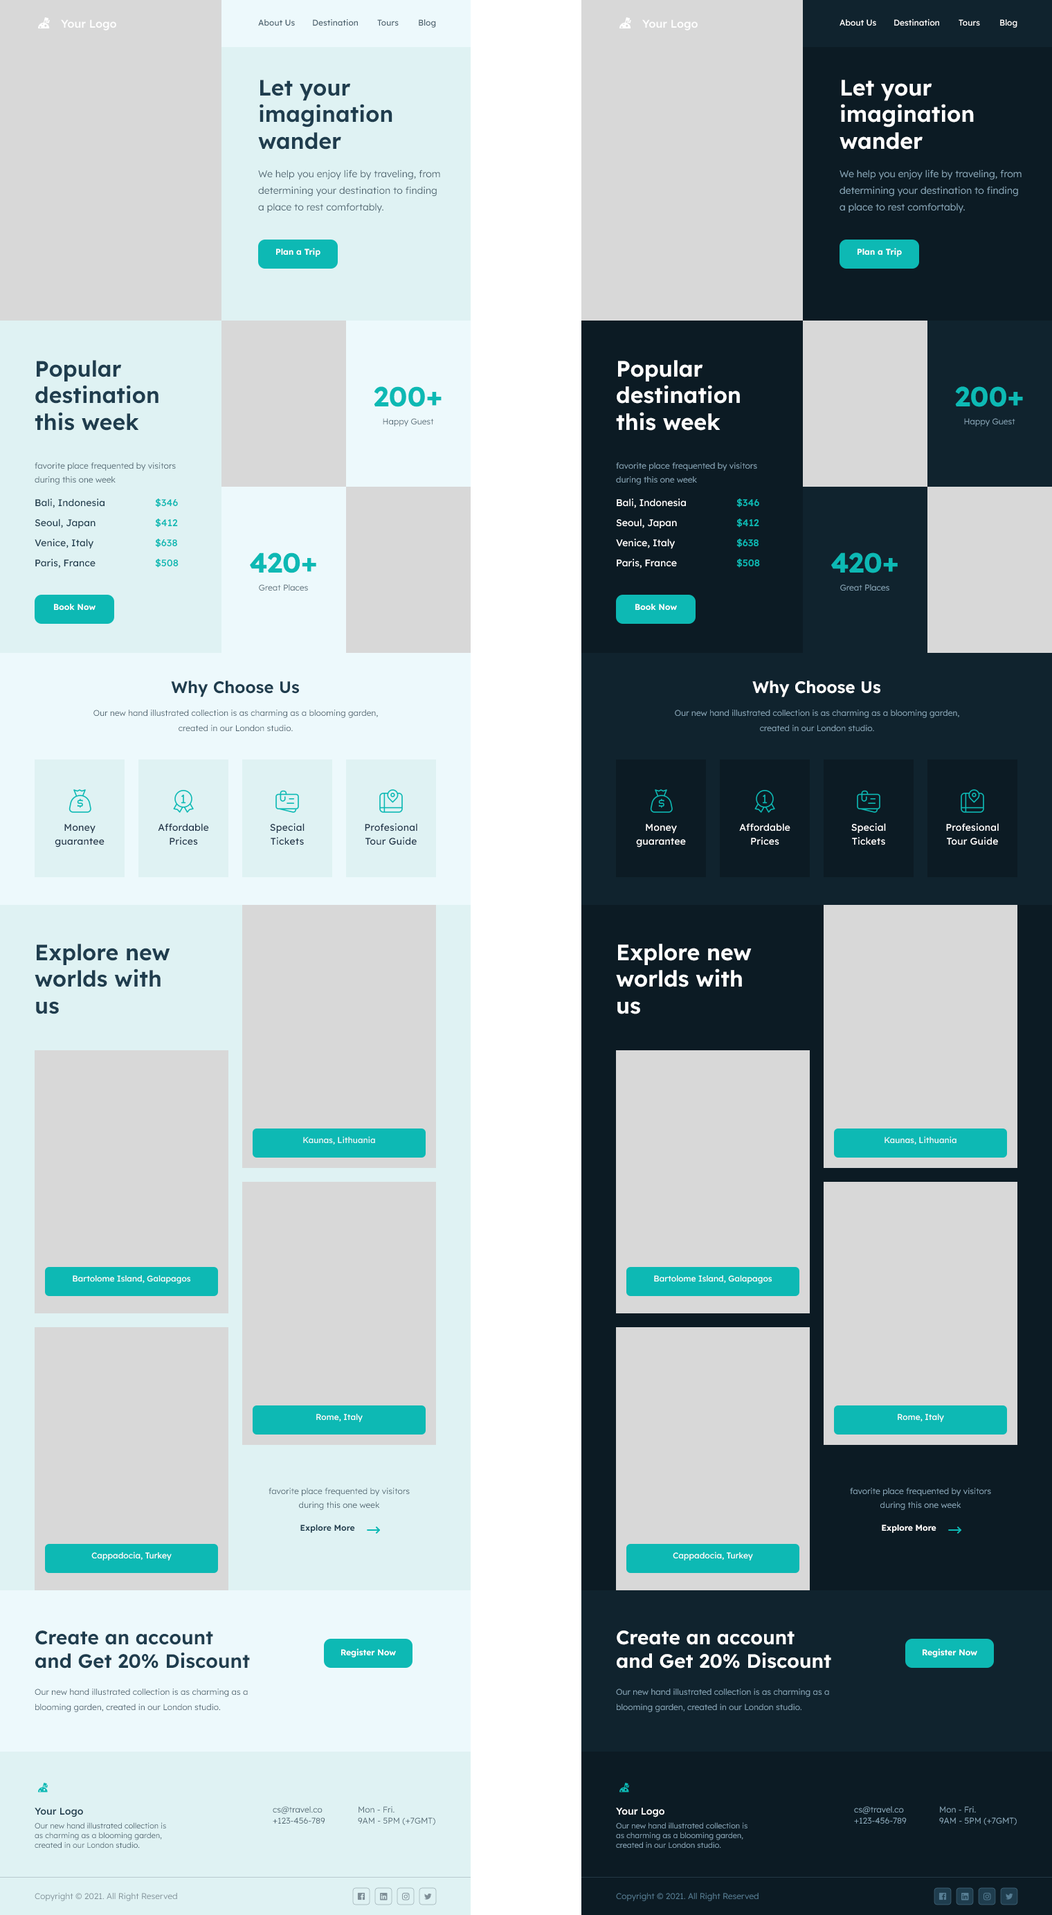
<style>
.page{position:relative;width:1052px;height:1915px;background:#d8d8d8}
.page>*{position:absolute;margin:0}
.t1{font:11.1px "LexendDeca-Medium";color:#ffffff}
.t2{font:8.3px "LexendDeca-Regular";color:#4b616d}
.t3{font:8.3px "LexendDeca-Regular";color:#ffffff}
.t4{font:22.2px "LexendDeca-SemiBold";color:#1f3d4e}
.t5{font:22.2px "LexendDeca-SemiBold";color:#ffffff}
.t6{font:9.7px/16.6px "LexendDeca-Light";color:#4b616d}
.t7{font:9.7px/16.6px "LexendDeca-Light";color:#8aa9bb}
.t8{font:8.3px "LexendDeca-SemiBold";color:#ffffff}
.t9{font:27.7px "LexendDeca-Bold";color:#0db9b4}
.t10{font:8.3px "LexendDeca-Light";color:#4b616d}
.t11{font:8.3px "LexendDeca-Light";color:#8aa9bb}
.t12{font:8.3px/13.8px "LexendDeca-Light";color:#4b616d}
.t13{font:8.3px/13.8px "LexendDeca-Light";color:#8aa9bb}
.t14{font:9.7px "LexendDeca-Regular";color:#1f3d4e}
.t15{font:9.7px "LexendDeca-Medium";color:#0db9b4}
.t16{font:9.7px "LexendDeca-Regular";color:#ffffff}
.t17{font:16.6px "LexendDeca-SemiBold";color:#1f3d4e}
.t18{font:16.6px "LexendDeca-SemiBold";color:#ffffff}
.t19{font:8.3px/15.2px "LexendDeca-Light";color:#4b616d}
.t20{font:8.3px/15.2px "LexendDeca-Light";color:#8aa9bb}
.t21{font:9.7px/13.8px "LexendDeca-Regular";letter-spacing:0.011em;color:#1e3348}
.t22{font:9.7px/13.8px "LexendDeca-Regular";letter-spacing:0.011em;color:#ffffff}
.t23{font:8.3px "LexendDeca-Regular";color:#edf9fc}
.t24{font:8.3px "LexendDeca-SemiBold";color:#1f3d4e}
.t25{font:19.4px "LexendDeca-SemiBold";color:#1f3d4e}
.t26{font:19.4px "LexendDeca-SemiBold";color:#ffffff}
.t27{font:9.7px "LexendDeca-Medium";color:#1f3d4e}
.t28{font:8.3px/11.1px "LexendDeca-Light";color:#4b616d}
.t29{font:9.7px "LexendDeca-Medium";color:#ffffff}
.t30{font:8.3px/11.1px "LexendDeca-Light";color:#8aa9bb}
.t31{font:7.6px/9.7px "LexendDeca-Light";color:#4b616d}
.t32{font:7.6px/9.7px "LexendDeca-Light";color:#8aa9bb}
.t33{font:8.3px "LexendDeca-Light";color:#7f8f97}
.t34{font:8.3px "LexendDeca-Light";color:#577e94}
</style>
<div class="page">
<p class="t1" style="left:61px;top:19px;width:55px;height:11px">Your Logo</p>
<p class="t2" style="left:258px;top:19px;width:37px;height:7px">About Us</p>
<p class="t2" style="left:313px;top:19px;width:46px;height:7px">Destination</p>
<p class="t2" style="left:377px;top:19px;width:22px;height:7px">Tours</p>
<p class="t2" style="left:419px;top:19px;width:17px;height:9px">Blog</p>
<p class="t1" style="left:642px;top:19px;width:56px;height:11px">Your Logo</p>
<p class="t3" style="left:840px;top:19px;width:36px;height:7px">About Us</p>
<p class="t3" style="left:894px;top:19px;width:46px;height:7px">Destination</p>
<p class="t3" style="left:959px;top:19px;width:21px;height:7px">Tours</p>
<p class="t3" style="left:1000px;top:19px;width:18px;height:9px">Blog</p>
<p class="t4" style="left:258px;top:80px;width:135px;height:70px">Let your imagination wander</p>
<p class="t5" style="left:840px;top:80px;width:134px;height:70px">Let your imagination wander</p>
<p class="t6" style="left:258px;top:170px;width:182px;height:43px">We help you enjoy life by traveling, from determining your destination to finding a place to rest comfortably.</p>
<p class="t7" style="left:840px;top:170px;width:182px;height:43px">We help you enjoy life by traveling, from determining your destination to finding a place to rest comfortably.</p>
<p class="t8" style="left:276px;top:248px;width:45px;height:9px">Plan a Trip</p>
<p class="t8" style="left:858px;top:248px;width:44px;height:9px">Plan a Trip</p>
<p class="t4" style="left:35px;top:360px;width:124px;height:71px">Popular destination<br>this week</p>
<p class="t5" style="left:616px;top:360px;width:124px;height:71px">Popular destination<br>this week</p>
<p class="t9" style="left:374px;top:386px;width:68px;height:21px">200+</p>
<p class="t9" style="left:955px;top:386px;width:68px;height:21px">200+</p>
<p class="t10" style="left:383px;top:418px;width:51px;height:8px">Happy Guest</p>
<p class="t11" style="left:964px;top:418px;width:52px;height:8px">Happy Guest</p>
<p class="t12" style="left:35px;top:462px;width:141px;height:23px">favorite place frequented by visitors during this one week</p>
<p class="t13" style="left:616px;top:462px;width:141px;height:23px">favorite place frequented by visitors during this one week</p>
<p class="t14" style="left:35px;top:498px;width:70px;height:10px">Bali, Indonesia</p>
<p class="t15" style="left:155px;top:498px;width:23px;height:9px">$346</p>
<p class="t16" style="left:617px;top:498px;width:69px;height:10px">Bali, Indonesia</p>
<p class="t15" style="left:737px;top:498px;width:22px;height:9px">$346</p>
<p class="t14" style="left:35px;top:519px;width:61px;height:10px">Seoul, Japan</p>
<p class="t15" style="left:155px;top:519px;width:23px;height:9px">$412</p>
<p class="t16" style="left:616px;top:519px;width:61px;height:10px">Seoul, Japan</p>
<p class="t15" style="left:737px;top:519px;width:22px;height:9px">$412</p>
<p class="t14" style="left:35px;top:539px;width:59px;height:10px">Venice, Italy</p>
<p class="t15" style="left:155px;top:539px;width:22px;height:9px">$638</p>
<p class="t16" style="left:616px;top:539px;width:60px;height:10px">Venice, Italy</p>
<p class="t15" style="left:737px;top:539px;width:22px;height:9px">$638</p>
<p class="t9" style="left:250px;top:552px;width:66px;height:21px">420+</p>
<p class="t9" style="left:831px;top:552px;width:67px;height:21px">420+</p>
<p class="t14" style="left:35px;top:559px;width:61px;height:9px">Paris, France</p>
<p class="t15" style="left:155px;top:559px;width:24px;height:9px">$508</p>
<p class="t16" style="left:617px;top:559px;width:60px;height:9px">Paris, France</p>
<p class="t15" style="left:737px;top:559px;width:23px;height:9px">$508</p>
<p class="t10" style="left:259px;top:584px;width:49px;height:7px">Great Places</p>
<p class="t11" style="left:840px;top:584px;width:50px;height:7px">Great Places</p>
<p class="t8" style="left:53px;top:604px;width:43px;height:7px">Book Now</p>
<p class="t8" style="left:635px;top:604px;width:42px;height:7px">Book Now</p>
<p class="t17" style="left:171px;top:681px;width:129px;height:16px">Why Choose Us</p>
<p class="t18" style="left:753px;top:681px;width:128px;height:16px">Why Choose Us</p>
<p class="t19" style="left:93px;top:710px;width:285px;height:22px;text-align:center">Our new hand illustrated collection is as charming as a blooming garden, created in our London studio.</p>
<p class="t20" style="left:675px;top:710px;width:285px;height:22px;text-align:center">Our new hand illustrated collection is as charming as a blooming garden, created in our London studio.</p>
<p class="t21" style="left:55px;top:824px;width:50px;height:23px;text-align:center">Money guarantee</p>
<p class="t21" style="left:158px;top:823px;width:51px;height:22px;text-align:center">Affordable <br>Prices</p>
<p class="t21" style="left:270px;top:823px;width:35px;height:22px;text-align:center">Special<br>Tickets</p>
<p class="t21" style="left:365px;top:823px;width:52px;height:22px;text-align:center">Profesional <br>Tour Guide</p>
<p class="t22" style="left:636px;top:824px;width:50px;height:23px;text-align:center">Money guarantee</p>
<p class="t22" style="left:739px;top:823px;width:52px;height:22px;text-align:center">Affordable <br>Prices</p>
<p class="t22" style="left:852px;top:823px;width:34px;height:22px;text-align:center">Special<br>Tickets</p>
<p class="t22" style="left:946px;top:823px;width:53px;height:22px;text-align:center">Profesional <br>Tour Guide</p>
<p class="t4" style="left:35px;top:944px;width:135px;height:70px">Explore new worlds with us</p>
<p class="t5" style="left:616px;top:944px;width:136px;height:70px">Explore new worlds with us</p>
<p class="t23" style="left:303px;top:1136px;width:72px;height:9px">Kaunas, Lithuania</p>
<p class="t23" style="left:885px;top:1136px;width:72px;height:9px">Kaunas, Lithuania</p>
<p class="t3" style="left:73px;top:1275px;width:118px;height:9px">Bartolome Island, Galapagos</p>
<p class="t3" style="left:654px;top:1275px;width:119px;height:9px">Bartolome Island, Galapagos</p>
<p class="t3" style="left:316px;top:1414px;width:47px;height:8px">Rome, Italy</p>
<p class="t3" style="left:898px;top:1414px;width:46px;height:8px">Rome, Italy</p>
<p class="t12" style="left:269px;top:1488px;width:141px;height:22px;text-align:center">favorite place frequented by visitors during this one week</p>
<p class="t13" style="left:850px;top:1488px;width:141px;height:22px;text-align:center">favorite place frequented by visitors during this one week</p>
<p class="t24" style="left:300px;top:1524px;width:55px;height:9px">Explore More</p>
<p class="t8" style="left:882px;top:1524px;width:55px;height:9px">Explore More</p>
<p class="t3" style="left:91px;top:1551px;width:81px;height:9px">Cappadocia, Turkey</p>
<p class="t3" style="left:673px;top:1551px;width:80px;height:9px">Cappadocia, Turkey</p>
<p class="t25" style="left:35px;top:1630px;width:215px;height:38px">Create an account<br>and Get 20% Discount</p>
<p class="t26" style="left:616px;top:1630px;width:215px;height:38px">Create an account<br>and Get 20% Discount</p>
<p class="t8" style="left:341px;top:1648px;width:55px;height:9px">Register Now</p>
<p class="t8" style="left:923px;top:1648px;width:55px;height:9px">Register Now</p>
<p class="t19" style="left:35px;top:1689px;width:213px;height:23px">Our new hand illustrated collection is as charming as a blooming garden, created in our London studio.</p>
<p class="t20" style="left:616px;top:1689px;width:213px;height:23px">Our new hand illustrated collection is as charming as a blooming garden, created in our London studio.</p>
<p class="t27" style="left:35px;top:1808px;width:48px;height:9px">Your Logo</p>
<p class="t28" style="left:273px;top:1806px;width:52px;height:18px">cs@travel.co<br>+123-456-789</p>
<p class="t28" style="left:358px;top:1806px;width:77px;height:20px">Mon - Fri.<br>9AM - 5PM (+7GMT)</p>
<p class="t29" style="left:616px;top:1808px;width:49px;height:9px">Your Logo</p>
<p class="t30" style="left:854px;top:1806px;width:53px;height:18px">cs@travel.co<br>+123-456-789</p>
<p class="t30" style="left:939px;top:1806px;width:78px;height:20px">Mon - Fri.<br>9AM - 5PM (+7GMT)</p>
<p class="t31" style="left:35px;top:1822px;width:131px;height:26px">Our new hand illustrated collection is as charming as a blooming garden, created in our London studio.</p>
<p class="t32" style="left:616px;top:1822px;width:132px;height:26px">Our new hand illustrated collection is as charming as a blooming garden, created in our London studio.</p>
<p class="t33" style="left:35px;top:1893px;width:142px;height:8px">Copyright © 2021. All Right Reserved</p>
<p class="t34" style="left:616px;top:1893px;width:143px;height:8px">Copyright © 2021. All Right Reserved</p>
</div>
